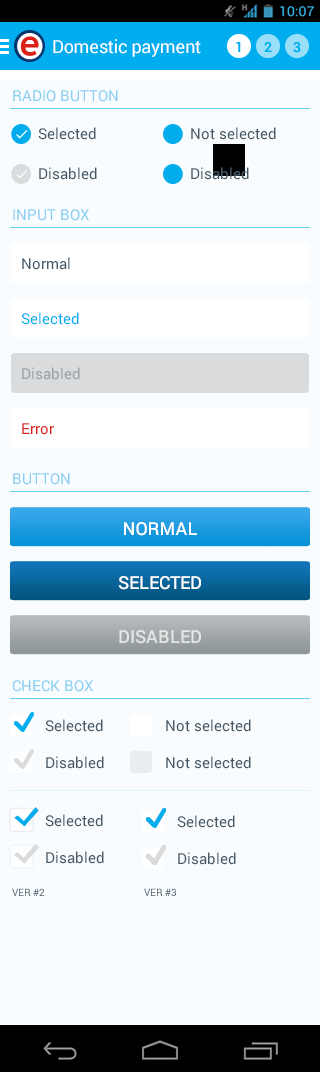
<style>
.page{position:relative;width:320px;height:1072px;background:#f8fcfe}
.page>*{position:absolute;margin:0}
.t1{font:18px "Roboto-Regular";letter-spacing:-0.015em;color:#ffffff}
.t2{font:15px "Roboto-Regular";color:#89cef3}
.t3{font:15px "Roboto-Regular";color:#465866}
.t4{font:15px "Roboto-Regular";color:#00aeef}
.t5{font:15px "Roboto-Regular";color:#9aa2a7}
.t6{font:15px "Roboto-Regular";color:#dc1e18}
.t7{font:18px "Roboto-Medium";color:#ffffff}
.t8{font:18px "Roboto-Medium";color:#e5e7e7}
.t9{font:10px "Roboto-Regular"}
</style>
<div class="page">
<p class="t1" style="left:53px;top:39px;width:148px;height:18px">Domestic payment</p>
<p class="t2" style="left:13px;top:90px;width:105px;height:12px">RADIO BUTTON</p>
<p class="t3" style="left:38px;top:127px;width:58px;height:13px">Selected</p>
<p class="t3" style="left:191px;top:127px;width:85px;height:13px">Not selected</p>
<p class="t3" style="left:39px;top:167px;width:58px;height:13px">Disabled</p>
<p class="t2" style="left:13px;top:209px;width:76px;height:12px">INPUT BOX</p>
<p class="t3" style="left:22px;top:257px;width:48px;height:13px">Normal</p>
<p class="t4" style="left:21px;top:312px;width:58px;height:13px">Selected</p>
<p class="t5" style="left:22px;top:367px;width:58px;height:13px">Disabled</p>
<p class="t6" style="left:22px;top:423px;width:32px;height:12px">Error</p>
<p class="t2" style="left:13px;top:473px;width:57px;height:12px">BUTTON</p>
<p class="t7" style="left:124px;top:522px;width:73px;height:14px">NORMAL</p>
<p class="t7" style="left:118px;top:576px;width:83px;height:14px">SELECTED</p>
<p class="t8" style="left:119px;top:630px;width:82px;height:14px">DISABLED</p>
<p class="t2" style="left:12px;top:680px;width:81px;height:12px">CHECK BOX</p>
<p class="t3" style="left:45px;top:719px;width:58px;height:13px">Selected</p>
<p class="t3" style="left:166px;top:719px;width:85px;height:13px">Not selected</p>
<p class="t3" style="left:46px;top:756px;width:58px;height:13px">Disabled</p>
<p class="t3" style="left:166px;top:756px;width:85px;height:13px">Not selected</p>
<p class="t3" style="left:45px;top:814px;width:58px;height:13px">Selected</p>
<p class="t3" style="left:177px;top:815px;width:58px;height:13px">Selected</p>
<p class="t3" style="left:46px;top:851px;width:58px;height:13px">Disabled</p>
<p class="t3" style="left:178px;top:852px;width:58px;height:13px">Disabled</p>
<p class="t9" style="left:12px;top:888px;width:33px;height:8px">VER #2</p>
<p class="t9" style="left:144px;top:888px;width:32px;height:8px">VER #3</p>
</div>
